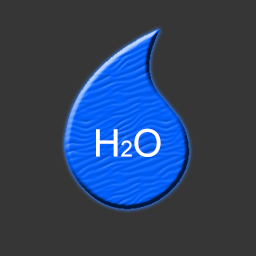
<style>
.page{position:relative;width:256px;height:256px;background:#363636}
.page>*{position:absolute;margin:0}
.t1{font:38.1px "ArialMT";color:#ffffff}
.t2{font:22.2px "ArialMT";color:#ffffff}
</style>
<div class="page">
<p class="t1" style="left:96px;top:128px;width:65px;height:29px">H<span class="t2">2</span>O</p>
</div>
